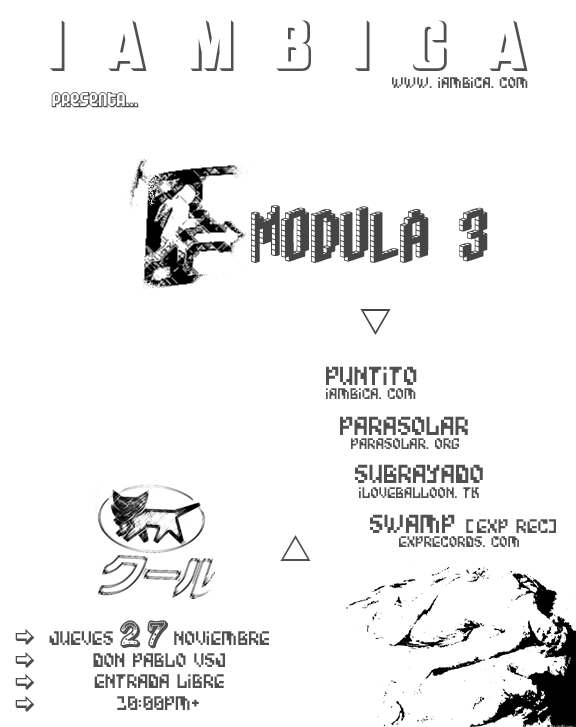
<style>
.page{position:relative;width:576px;height:727px;background:#ffffff}
.page>*{position:absolute;margin:0}
.t1{font:60px "BasRelief";color:#505050}
.t2{font:14px "Bitwise-Alpha";color:#505050}
.t3{font:18px "Air";color:#505050}
.t4{font:60px "Blox-(BRK";color:#454545}
.t5{font:24px "Bitwise-Alpha";color:#505050}
.t6{font:18px "Bitwise-Alpha";color:#505050}
.t7{font:30px "Jokewood";color:#505050}
</style>
<div class="page">
<p class="t1" style="left:49px;top:20px;width:479px;height:51px">i   a   m   b   i   c   a</p>
<p class="t2" style="left:392px;top:77px;width:136px;height:11px">www.iambica.com</p>
<p class="t3" style="left:51px;top:92px;width:88px;height:16px">presenta...</p>
<p class="t4" style="left:251px;top:205px;width:237px;height:58px">modula 3</p>
<p class="t5" style="left:326px;top:366px;width:91px;height:19px">puntito</p>
<p class="t2" style="left:326px;top:388px;width:90px;height:11px">iambica.com</p>
<p class="t5" style="left:340px;top:416px;width:128px;height:19px">parasolar</p>
<p class="t2" style="left:351px;top:438px;width:108px;height:11px">parasolar.org</p>
<p class="t5" style="left:355px;top:464px;width:128px;height:19px">subrayado</p>
<p class="t2" style="left:359px;top:487px;width:120px;height:11px">iloveballoon.tk</p>
<p class="t6" style="left:370px;top:514px;width:186px;height:19px"><span class="t5">swamp </span>[exp rec]</p>
<p class="t2" style="left:399px;top:536px;width:120px;height:11px">exprecords.com</p>
<p class="t6" style="left:49px;top:620px;width:220px;height:90px;text-align:center">jueves <span class="t7">2 7</span> noviembre<br>don pablo vsj<br>entrada libre<br>10:00pm+</p>
</div>
